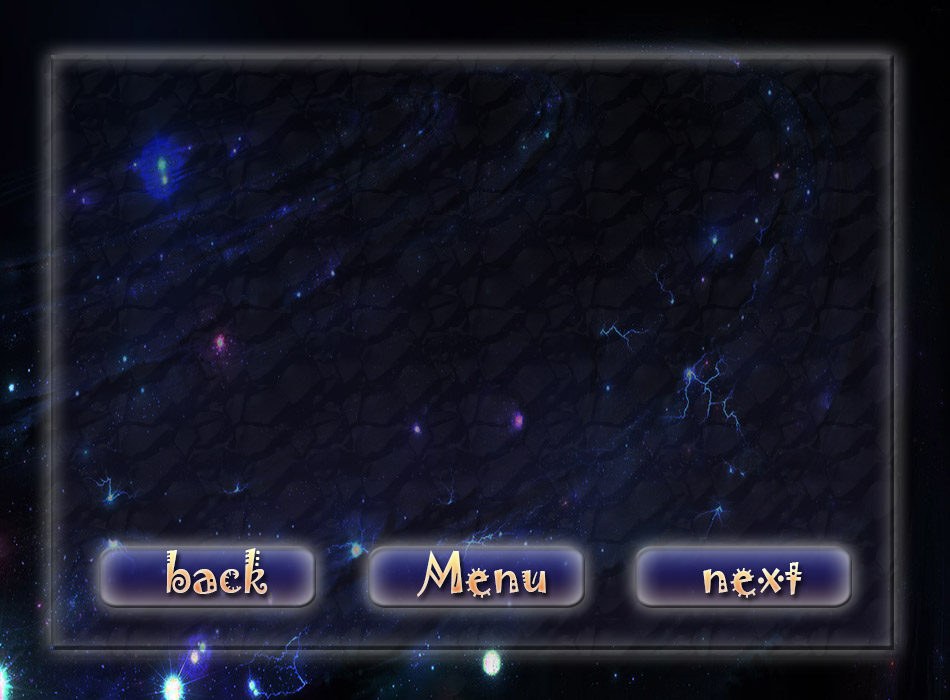
<style>
.page{position:relative;width:950px;height:700px}
.page>*{position:absolute;margin:0}
.t1{font:50px "Jokerman-Regular";scale:0.93 1}
</style>
<div class="page">
<p class="t1" style="left:166px;top:548px;width:102px;height:46px">back</p>
<p class="t1" style="left:417px;top:550px;width:129px;height:48px">Menu</p>
<p class="t1" style="left:703px;top:562px;width:99px;height:36px">next</p>
</div>
